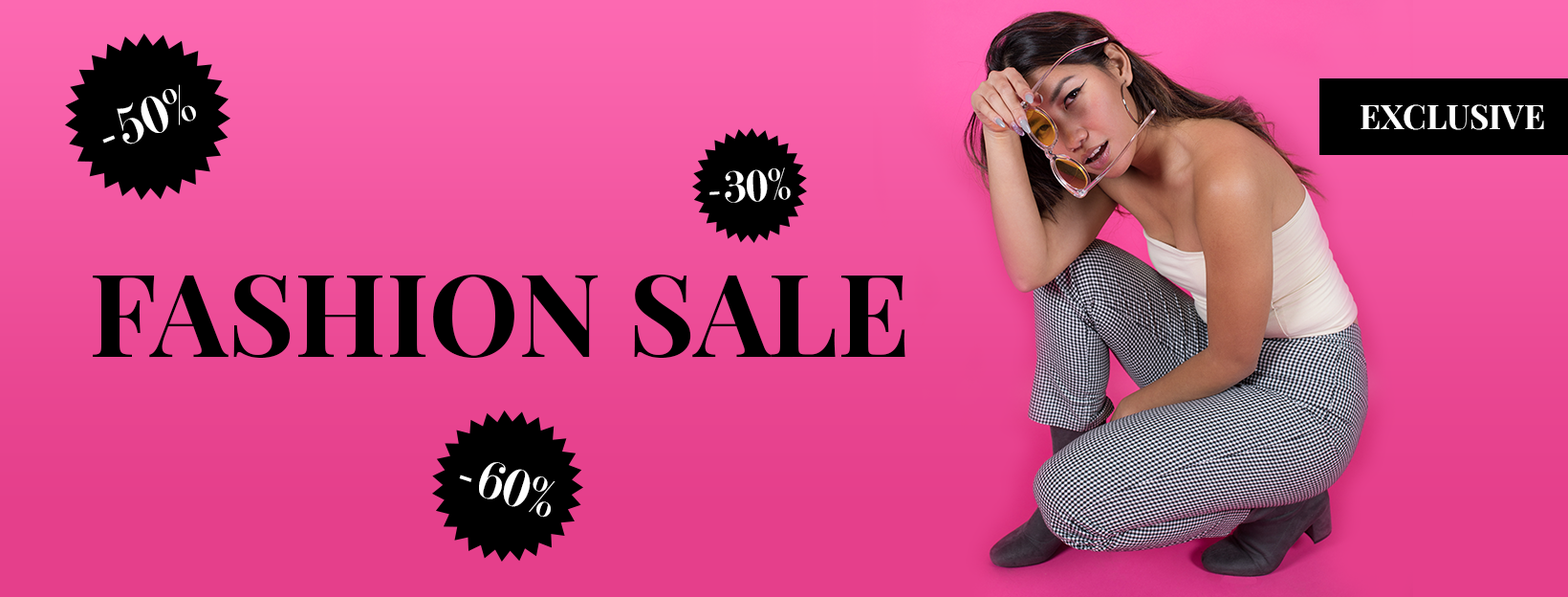
<style>
.page{position:relative;width:1568px;height:597px}
.page>*{position:absolute;margin:0}
.t1{font:57.4px "Modern-Regular";color:#ffffff}
.t2{font:33.5px "PlayfairDisplay-Bold";color:#ffffff}
.t3{font:47.8px "Modern-Regular";color:#ffffff}
.t4{font:114.7px "PlayfairDisplay-Bold";color:#000000}
</style>
<div class="page">
<p class="t1" style="left:102px;top:84px;width:94px;height:60px;rotate:-22deg">-50%</p>
<p class="t2" style="left:1361px;top:104px;width:183px;height:26px">EXCLUSIVE</p>
<p class="t3" style="left:709px;top:167px;width:82px;height:36px;rotate:-4deg">-30%</p>
<p class="t4" style="left:93px;top:274px;width:812px;height:84px">FASHION SALE</p>
<p class="t1" style="left:459px;top:462px;width:96px;height:55px;rotate:18deg">-60%</p>
</div>
